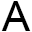
<style>
.page{position:relative;width:32px;height:32px;background:#ffffff}
.page>*{position:absolute;margin:0}
.t1{font:41.7px "ArialMT";color:#000000}
</style>
<div class="page">
<p class="t1" style="left:1px;top:1px;width:30px;height:30px">A</p>
</div>
